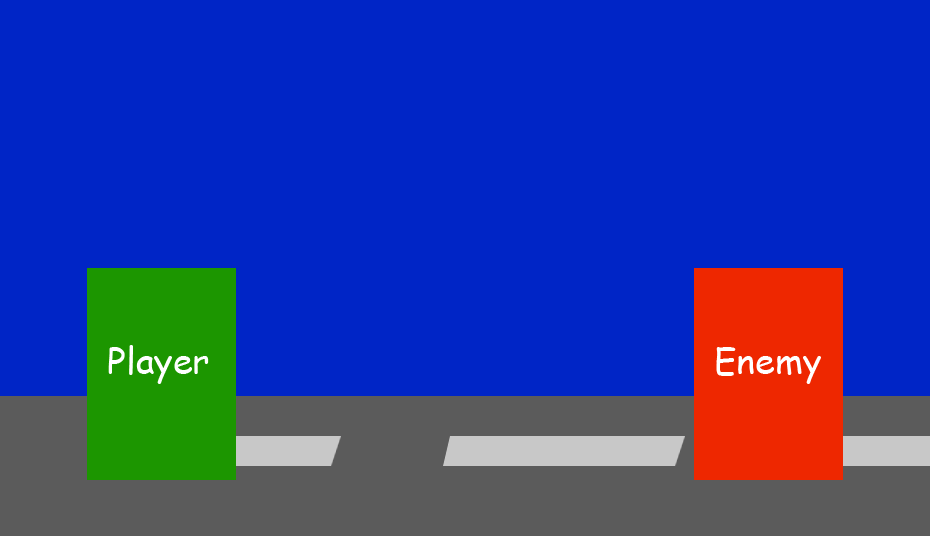
<style>
.page{position:relative;width:930px;height:536px;background:#0025c6}
.page>*{position:absolute;margin:0}
.t1{font:36px "ComicSansMS";color:#ffffff}
</style>
<div class="page">
<p class="t1" style="left:108px;top:345px;width:101px;height:39px">Player</p>
<p class="t1" style="left:716px;top:347px;width:105px;height:37px">Enemy</p>
</div>
